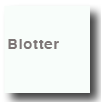
<style>
.page{position:relative;width:101px;height:102px;background:#f8fdfa}
.page>*{position:absolute;margin:0}
.t1{font:14px "Helvetica-Bold";letter-spacing:0.075em;color:#7d7676}
</style>
<div class="page">
<p class="t1" style="left:8px;top:39px;width:51px;height:10px">Blotter</p>
</div>
